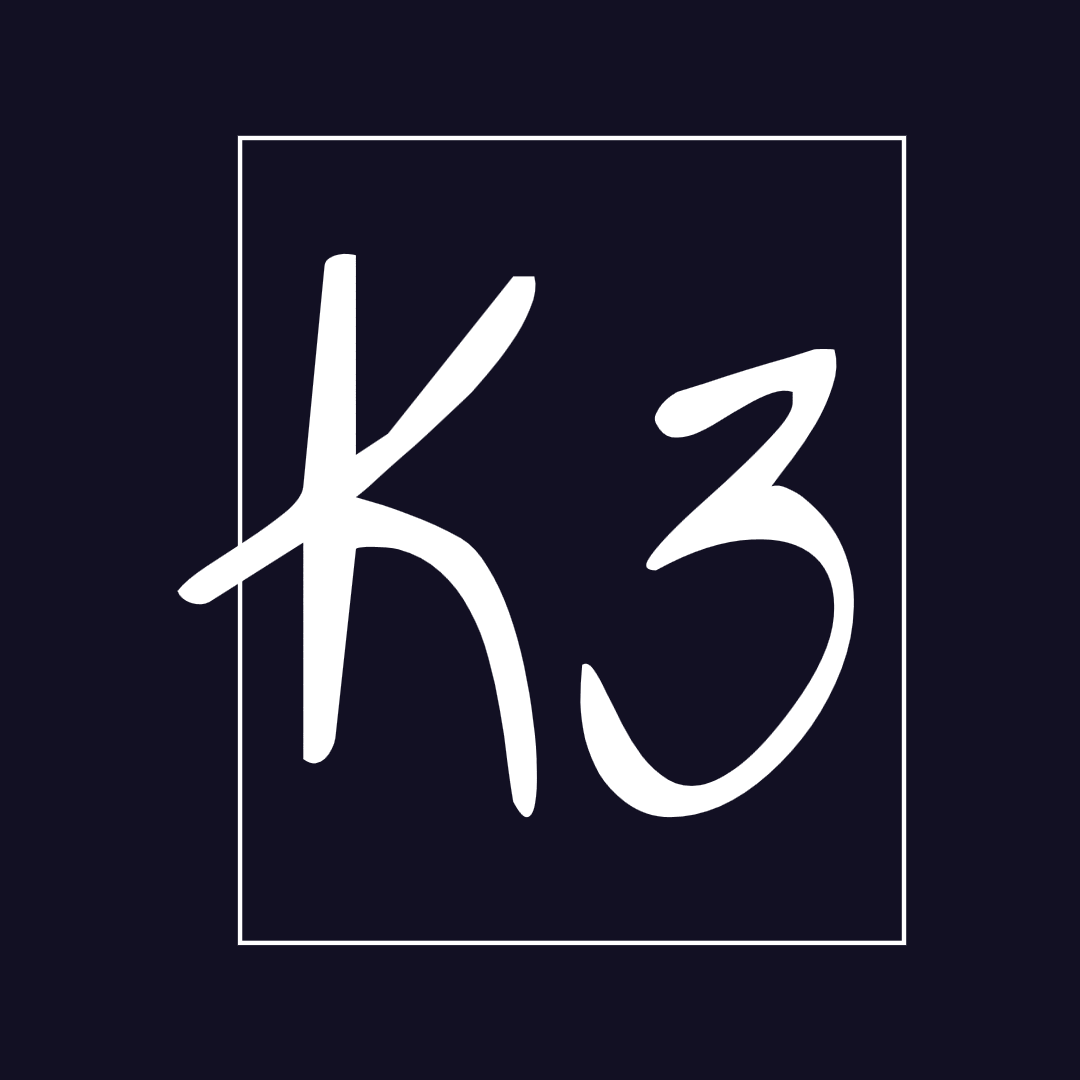
<style>
.page{position:relative;width:1080px;height:1080px;background:#121023}
.page>*{position:absolute;margin:0}
.t1{font:619.4px "OvertheRainbow";color:#ffffff}
</style>
<div class="page">
<p class="t1" style="left:177px;top:253px;width:677px;height:565px">K3</p>
</div>
